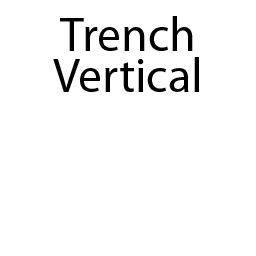
<style>
.page{position:relative;width:256px;height:256px;background:#ffffff}
.page>*{position:absolute;margin:0}
.t1{font:48px "MyriadPro-Regular";color:#000000}
</style>
<div class="page">
<p class="t1" style="left:60px;top:16px;width:133px;height:35px">Trench</p>
<p class="t1" style="left:53px;top:57px;width:146px;height:35px">Vertical</p>
</div>
